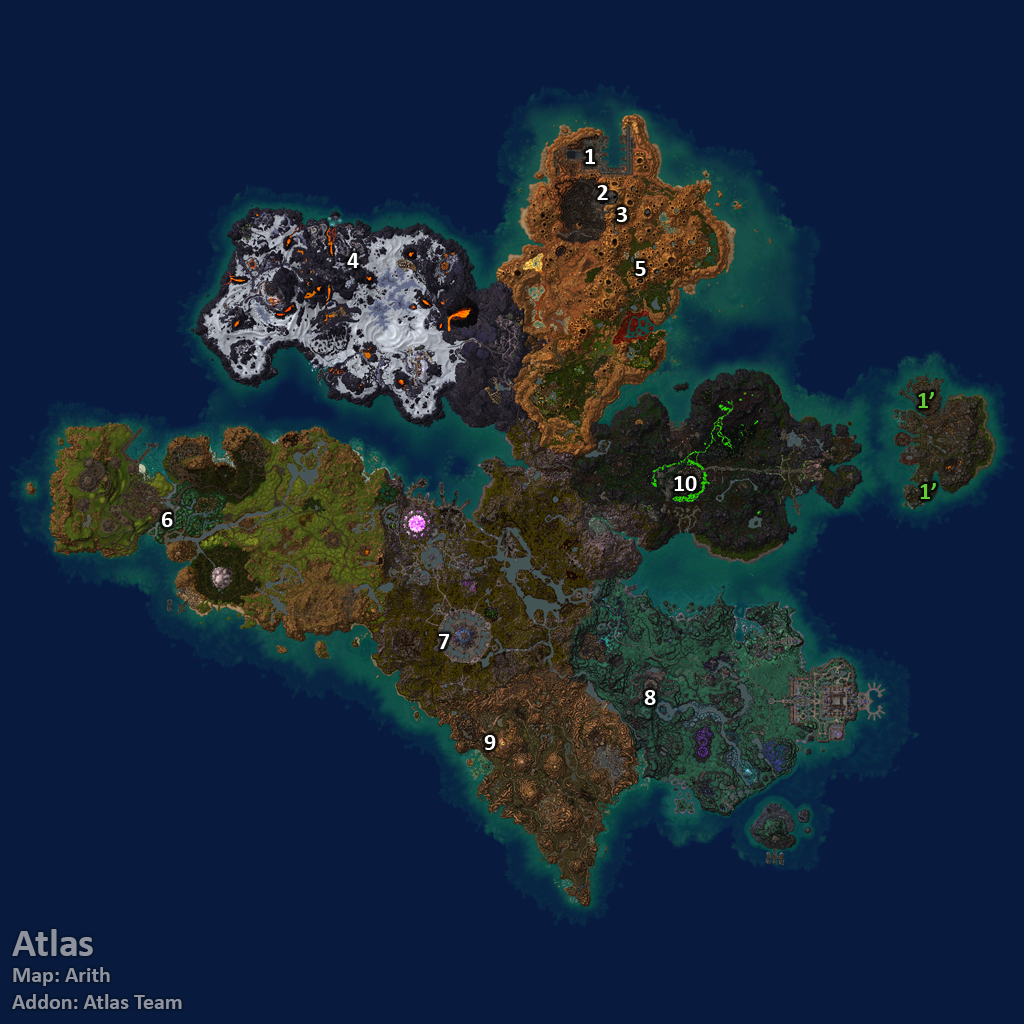
<style>
.page{position:relative;width:1024px;height:1024px;background:#081b3f}
.page>*{position:absolute;margin:0}
.t1{font:24px "Calibri-Bold";color:#ffffff}
.t2{font:24px "Calibri-Bold";color:#66cc33}
.t3{font:22px "Calibri-Bold";color:#8f939e}
.t4{font:40px "Calibri-Bold";color:#8f939e}
</style>
<div class="page">
<p class="t1" style="left:585px;top:149px;width:10px;height:15px">1</p>
<p class="t1" style="left:597px;top:185px;width:11px;height:15px">2</p>
<p class="t1" style="left:617px;top:207px;width:10px;height:15px">3</p>
<p class="t1" style="left:347px;top:253px;width:12px;height:15px">4</p>
<p class="t1" style="left:635px;top:261px;width:11px;height:15px">5</p>
<p class="t2" style="left:918px;top:392px;width:16px;height:16px">1’</p>
<p class="t1" style="left:674px;top:476px;width:23px;height:15px">10</p>
<p class="t2" style="left:920px;top:483px;width:16px;height:16px">1’</p>
<p class="t1" style="left:162px;top:512px;width:11px;height:15px">6</p>
<p class="t1" style="left:439px;top:634px;width:11px;height:15px">7</p>
<p class="t1" style="left:644px;top:690px;width:12px;height:15px">8</p>
<p class="t1" style="left:484px;top:735px;width:12px;height:15px">9</p>
<p class="t3" style="left:12px;top:929px;width:170px;height:80px"><span class="t4">Atlas<br></span>Map: Arith<br>Addon: Atlas Team</p>
</div>
